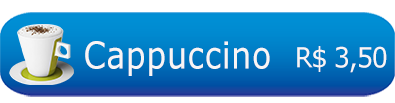
<style>
.page{position:relative;width:395px;height:103px}
.page>*{position:absolute;margin:0}
.t1{font:36.9px "MSReferenceSansSerif";letter-spacing:0.02em;color:#f8f5f5;scale:0.86 1}
.t2{font:27.5px "MSReferenceSansSerif";letter-spacing:-0.05em;color:#f8f5f5;scale:0.93 1}
</style>
<div class="page">
<p class="t1" style="left:85px;top:41px;width:185px;height:35px">Cappuccino</p>
<p class="t2" style="left:297px;top:46px;width:90px;height:27px">R$ 3,50</p>
</div>
